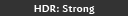
<style>
.page{position:relative;width:128px;height:16px;background:#333333}
.page>*{position:absolute;margin:0}
.t1{font:10px "AmiraParadiso";letter-spacing:0.05em;color:#ffffff}
</style>
<div class="page">
<p class="t1" style="left:34px;top:5px;width:61px;height:9px">HDR: Strong</p>
</div>
